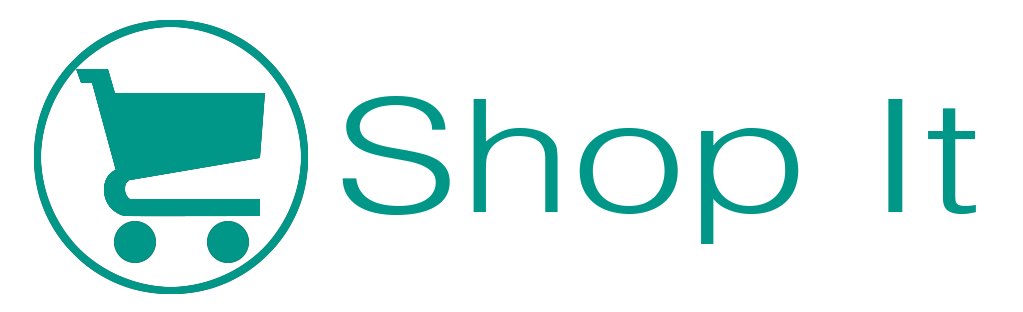
<style>
.page{position:relative;width:1023px;height:312px;background:#ffffff}
.page>*{position:absolute;margin:0}
.t1{font:157px "Helvetica-Light";color:#009688;scale:1.3 1}
</style>
<div class="page">
<p class="t1" style="left:342px;top:96px;width:634px;height:148px">Shop It</p>
</div>
